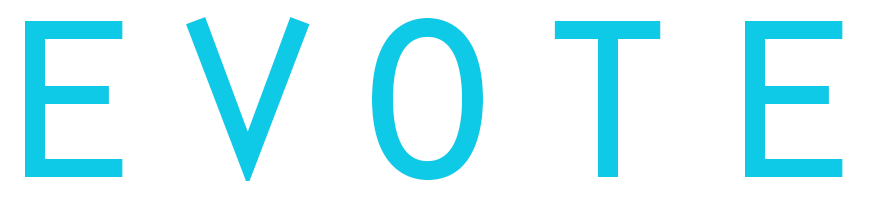
<style>
.page{position:relative;width:878px;height:207px;background:#ffffff}
.page>*{position:absolute;margin:0}
.t1{font:300px "OratorStd";color:#0fcae6}
</style>
<div class="page">
<p class="t1" style="left:25px;top:17px;width:818px;height:164px">evote</p>
</div>
